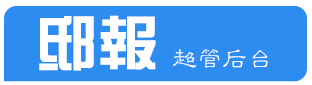
<style>
.page{position:relative;width:312px;height:85px;background:#2d8cf0}
.page>*{position:absolute;margin:0}
.t1{font:61px "FZZYFW--GB1-0";color:#ffffff}
.t2{font:25px "FZLBJW--GB1-0";color:#ffffff}
</style>
<div class="page">
<p class="t1" style="left:39px;top:15px;width:117px;height:56px">邸报</p>
<p class="t2" style="left:173px;top:49px;width:95px;height:19px">超管后台</p>
</div>
